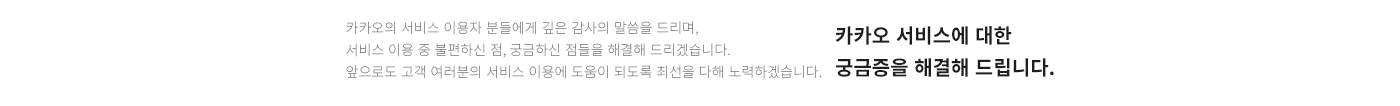
<style>
.page{position:relative;width:1400px;height:106px;background:#ffffff}
.page>*{position:absolute;margin:0}
.t1{font:14px/22px "NotoSansKR-Light";color:#666666}
.t2{font:20px/32px "NotoSansKR-Bold";color:#1e1e1e}
</style>
<div class="page">
<p class="t1" style="left:346px;top:21px;width:476px;height:58px">카카오의 서비스 이용자 분들에게 깊은 감사의 말씀을 드리며, <br>서비스 이용 중 불편하신 점, 궁금하신 점들을 해결해 드리겠습니다. <br>앞으로도 고객 여러분의 서비스 이용에 도움이 되도록 최선을 다해 노력하겠습니다.</p>
<p class="t2" style="left:835px;top:26px;width:219px;height:51px">카카오 서비스에 대한<br>궁금증을 해결해 드립니다.</p>
</div>
